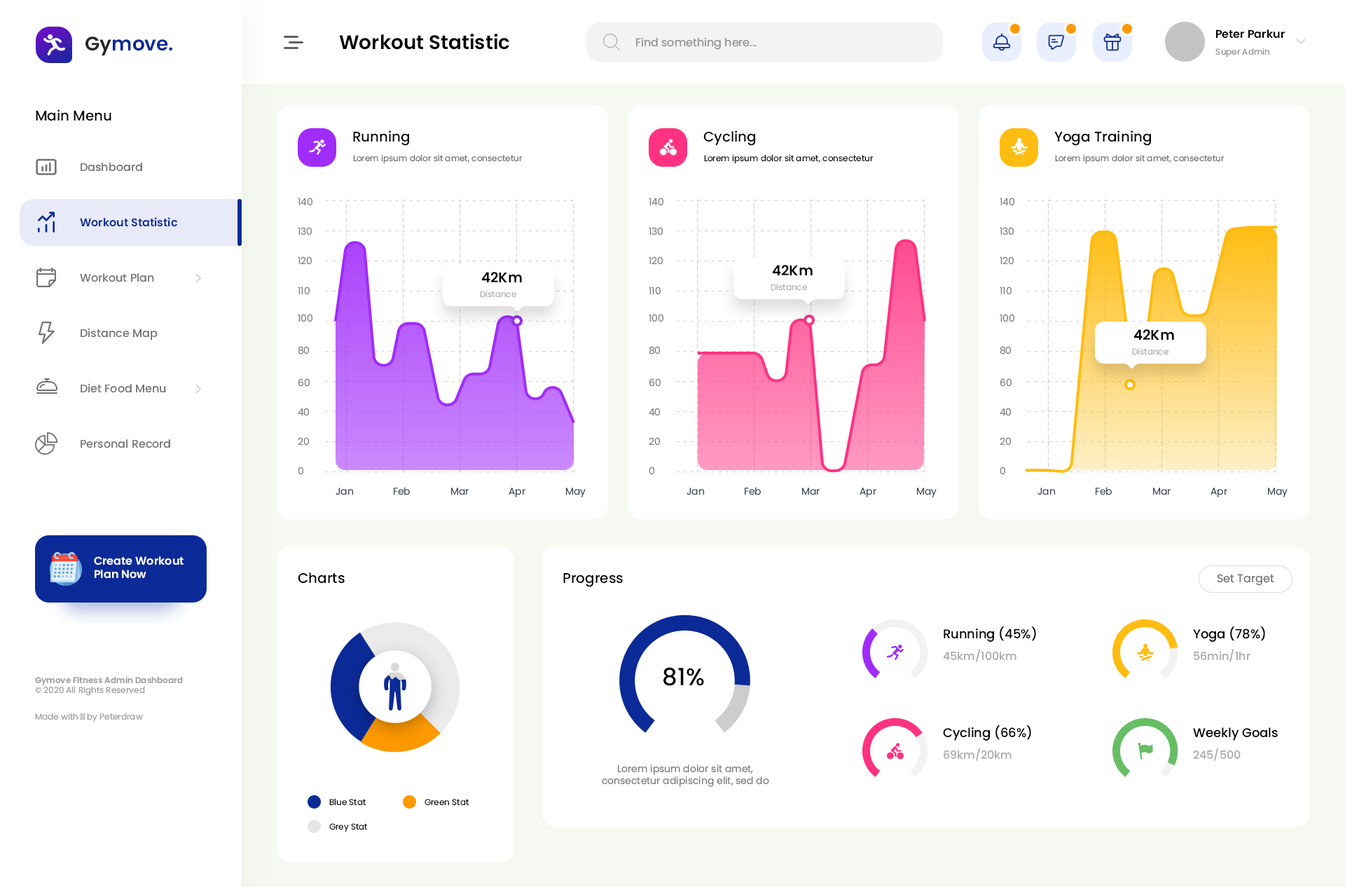
<style>
.page{position:relative;width:1345px;height:887px;background:#ffffff}
.page>*{position:absolute;margin:0}
.t1{font:11.2px "Poppins-SemiBold";color:#000000}
.t2{font:19.6px "Poppins-SemiBold";color:#0b2a97}
.t3{font:19.6px "Poppins-SemiBold";color:#262626}
.t4{font:19.6px "Poppins-SemiBold";color:#000000}
.t5{font:11.2px "Poppins-Regular";color:#8d8d8d}
.t6{font:8.4px "Poppins-Regular";color:#8f8f8f}
.t7{font:14px "Poppins-Medium";color:#000000}
.t8{font:8.4px "Poppins-Regular";color:#6d6d6d}
.t9{font:8.4px "Poppins-Regular";color:#000000}
.t10{font:11.2px "Poppins-Medium";color:#757575}
.t11{font:9.8px "Poppins-Regular";color:#808080}
.t12{font:11.2px "Poppins-SemiBold";color:#0b2a97}
.t13{font:14px "Poppins-SemiBold";color:#000000}
.t14{font:8.4px "Poppins-Regular";color:#afafaf}
.t15{font:9.8px "Poppins-Regular";color:#3e4954}
.t16{font:11.2px "Poppins-SemiBold";color:#ffffff}
.t17{font:11.2px "Poppins-Regular";color:#6b6b6b}
.t18{font:12.6px "Poppins-Medium";color:#000000}
.t19{font:11.2px "Poppins-Medium";color:#aaaaaa}
.t20{font:8.4px "Poppins-SemiBold";color:#969ba0}
.t21{font:8.4px "Poppins-Regular";color:#969ba0}
.t22{font:23.8px "Poppins-Medium";color:#000000}
.t23{font:9.8px "Poppins-Regular";color:#7a7a7a}
</style>
<div class="page">
<p class="t1" style="left:1216px;top:29px;width:69px;height:10px">Peter Parkur</p>
<p class="t2" style="left:85px;top:36px;width:87px;height:20px"><span class="t3">Gy</span>move.</p>
<p class="t4" style="left:339px;top:34px;width:170px;height:16px">Workout Statistic</p>
<p class="t5" style="left:636px;top:37px;width:120px;height:13px">Find something here...</p>
<p class="t6" style="left:1215px;top:48px;width:54px;height:9px">Super Admin</p>
<p class="t7" style="left:36px;top:109px;width:75px;height:12px">Main Menu</p>
<p class="t7" style="left:353px;top:130px;width:56px;height:16px">Running</p>
<p class="t7" style="left:703px;top:130px;width:52px;height:16px">Cycling</p>
<p class="t7" style="left:1054px;top:130px;width:97px;height:16px">Yoga Training</p>
<p class="t8" style="left:353px;top:154px;width:170px;height:10px">Lorem ipsum dolor sit amet, consectetur</p>
<p class="t9" style="left:704px;top:154px;width:169px;height:10px">Lorem ipsum dolor sit amet, consectetur</p>
<p class="t8" style="left:1055px;top:154px;width:169px;height:10px">Lorem ipsum dolor sit amet, consectetur</p>
<p class="t10" style="left:81px;top:162px;width:61px;height:10px">Dashboard</p>
<p class="t11" style="left:298px;top:198px;width:14px;height:8px">140</p>
<p class="t11" style="left:649px;top:198px;width:14px;height:8px">140</p>
<p class="t11" style="left:999px;top:198px;width:15px;height:8px">140</p>
<p class="t12" style="left:80px;top:217px;width:97px;height:10px">Workout Statistic</p>
<p class="t11" style="left:298px;top:227px;width:14px;height:8px">130</p>
<p class="t11" style="left:649px;top:227px;width:14px;height:8px">130</p>
<p class="t11" style="left:999px;top:227px;width:14px;height:8px">130</p>
<p class="t11" style="left:298px;top:256px;width:14px;height:9px">120</p>
<p class="t11" style="left:649px;top:256px;width:14px;height:9px">120</p>
<p class="t11" style="left:999px;top:256px;width:14px;height:9px">120</p>
<p class="t13" style="left:773px;top:265px;width:39px;height:10px">42Km</p>
<p class="t10" style="left:80px;top:273px;width:74px;height:9px">Workout Plan</p>
<p class="t13" style="left:482px;top:272px;width:40px;height:10px">42Km</p>
<p class="t11" style="left:298px;top:286px;width:12px;height:9px">110</p>
<p class="t14" style="left:480px;top:290px;width:36px;height:8px">Distance</p>
<p class="t11" style="left:649px;top:286px;width:11px;height:9px">110</p>
<p class="t14" style="left:770px;top:283px;width:37px;height:8px">Distance</p>
<p class="t11" style="left:999px;top:286px;width:12px;height:9px">110</p>
<p class="t11" style="left:298px;top:314px;width:14px;height:8px">100</p>
<p class="t11" style="left:649px;top:314px;width:14px;height:8px">100</p>
<p class="t11" style="left:999px;top:314px;width:15px;height:8px">100</p>
<p class="t10" style="left:81px;top:328px;width:77px;height:12px">Distance Map</p>
<p class="t13" style="left:1134px;top:329px;width:40px;height:11px">42Km</p>
<p class="t11" style="left:298px;top:346px;width:11px;height:8px">80</p>
<p class="t11" style="left:649px;top:346px;width:11px;height:8px">80</p>
<p class="t11" style="left:999px;top:346px;width:12px;height:8px">80</p>
<p class="t14" style="left:1132px;top:347px;width:36px;height:8px">Distance</p>
<p class="t10" style="left:81px;top:383px;width:85px;height:10px">Diet Food Menu</p>
<p class="t11" style="left:298px;top:378px;width:12px;height:9px">60</p>
<p class="t11" style="left:649px;top:378px;width:11px;height:9px">60</p>
<p class="t11" style="left:999px;top:378px;width:12px;height:9px">60</p>
<p class="t11" style="left:298px;top:408px;width:11px;height:8px">40</p>
<p class="t11" style="left:649px;top:408px;width:11px;height:8px">40</p>
<p class="t11" style="left:999px;top:408px;width:12px;height:8px">40</p>
<p class="t11" style="left:298px;top:437px;width:11px;height:8px">20</p>
<p class="t11" style="left:649px;top:437px;width:11px;height:8px">20</p>
<p class="t11" style="left:999px;top:437px;width:12px;height:8px">20</p>
<p class="t10" style="left:81px;top:439px;width:89px;height:9px">Personal Record</p>
<p class="t11" style="left:298px;top:466px;width:5px;height:9px">0</p>
<p class="t11" style="left:649px;top:466px;width:5px;height:9px">0</p>
<p class="t11" style="left:999px;top:466px;width:6px;height:9px">0</p>
<p class="t15" style="left:335px;top:487px;width:19px;height:8px">Jan</p>
<p class="t15" style="left:394px;top:487px;width:16px;height:8px">Feb</p>
<p class="t15" style="left:451px;top:487px;width:18px;height:8px">Mar</p>
<p class="t15" style="left:508px;top:487px;width:17px;height:10px">Apr</p>
<p class="t15" style="left:566px;top:487px;width:20px;height:10px">May</p>
<p class="t15" style="left:686px;top:487px;width:19px;height:8px">Jan</p>
<p class="t15" style="left:745px;top:487px;width:16px;height:8px">Feb</p>
<p class="t15" style="left:802px;top:487px;width:17px;height:8px">Mar</p>
<p class="t15" style="left:859px;top:487px;width:17px;height:10px">Apr</p>
<p class="t15" style="left:917px;top:487px;width:19px;height:10px">May</p>
<p class="t15" style="left:1037px;top:487px;width:19px;height:8px">Jan</p>
<p class="t15" style="left:1095px;top:487px;width:17px;height:8px">Feb</p>
<p class="t15" style="left:1153px;top:487px;width:17px;height:8px">Mar</p>
<p class="t15" style="left:1210px;top:487px;width:17px;height:10px">Apr</p>
<p class="t15" style="left:1268px;top:487px;width:19px;height:10px">May</p>
<p class="t16" style="left:94px;top:556px;width:90px;height:23px">Create Workout Plan Now</p>
<p class="t7" style="left:298px;top:572px;width:47px;height:11px">Charts</p>
<p class="t7" style="left:563px;top:573px;width:60px;height:14px">Progress</p>
<p class="t17" style="left:1217px;top:574px;width:57px;height:12px">Set Target</p>
<p class="t18" style="left:943px;top:626px;width:93px;height:16px">Running (45%)</p>
<p class="t18" style="left:1193px;top:626px;width:72px;height:16px">Yoga (78%)</p>
<p class="t19" style="left:943px;top:649px;width:73px;height:13px">45km/100km</p>
<p class="t19" style="left:1193px;top:649px;width:57px;height:13px">56min/1hr</p>
<p class="t20" style="left:35px;top:676px;width:148px;height:20px">Gymove Fitness Admin Dashboard<br><span class="t21">© 2020 All Rights Reserved</span></p>
<p class="t22" style="left:663px;top:667px;width:41px;height:19px">81%</p>
<p class="t21" style="left:35px;top:712px;width:108px;height:10px">Made with ♥ by Peterdraw</p>
<p class="t18" style="left:943px;top:725px;width:88px;height:15px">Cycling (66%)</p>
<p class="t18" style="left:1193px;top:727px;width:85px;height:13px">Weekly Goals</p>
<p class="t19" style="left:943px;top:748px;width:68px;height:13px">69km/20km</p>
<p class="t19" style="left:1193px;top:748px;width:47px;height:13px">245/500</p>
<p class="t23" style="left:602px;top:764px;width:167px;height:23px;text-align:center">Lorem ipsum dolor sit amet, consectetur adipiscing elit, sed do</p>
<p class="t9" style="left:329px;top:798px;width:37px;height:7px">Blue Stat</p>
<p class="t9" style="left:424px;top:798px;width:45px;height:7px">Green Stat</p>
<p class="t9" style="left:329px;top:823px;width:39px;height:9px">Grey Stat</p>
</div>
